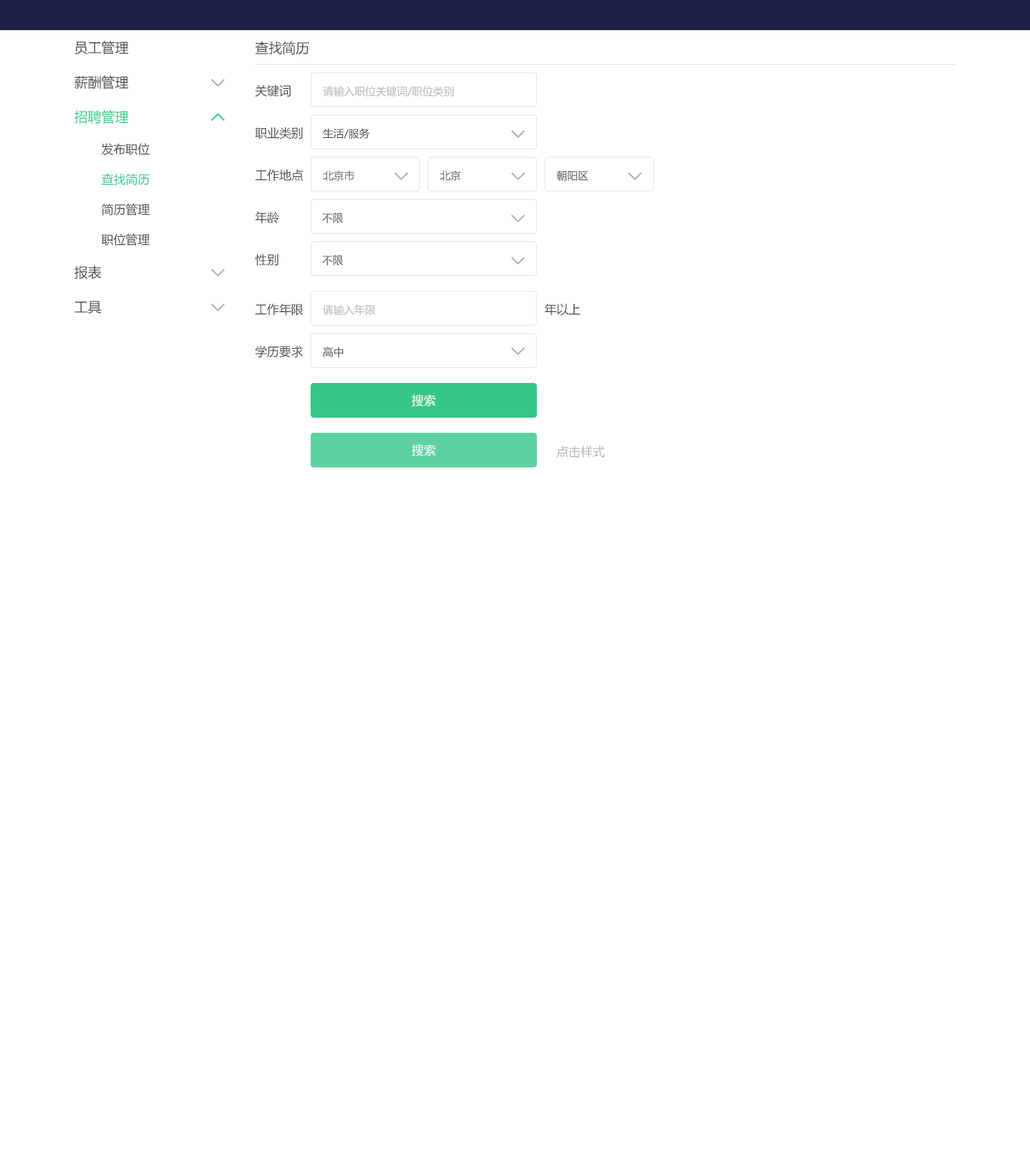
<style>
.page{position:relative;width:1030px;height:1158px;background:#ffffff}
.page>*{position:absolute;margin:0}
.t1{font:13.6px "MicrosoftYaHei";color:#4d4d4d}
.t2{font:12.1px "MicrosoftYaHei";color:#4d4d4d}
.t3{font:10.6px "MicrosoftYaHei";color:#b3b3b3}
.t4{font:13.6px "MicrosoftYaHei";color:#35c787}
.t5{font:10.6px "MicrosoftYaHei";color:#4d4d4d}
.t6{font:12.1px "MicrosoftYaHei";color:#35c787}
.t7{font:12.1px "MicrosoftYaHei";color:#ffffff}
.t8{font:12.1px "MicrosoftYaHei";color:#b3b3b3}
</style>
<div class="page">
<p class="t1" style="left:75px;top:41px;width:54px;height:13px">员工管理</p>
<p class="t1" style="left:255px;top:41px;width:54px;height:14px">查找简历</p>
<p class="t1" style="left:74px;top:75px;width:55px;height:14px">薪酬管理</p>
<p class="t2" style="left:255px;top:84px;width:36px;height:13px">关键词</p>
<p class="t3" style="left:323px;top:86px;width:131px;height:10px">请输入职位关键词/职位类别</p>
<p class="t4" style="left:74px;top:110px;width:55px;height:14px">招聘管理</p>
<p class="t2" style="left:255px;top:127px;width:47px;height:12px">职业类别</p>
<p class="t5" style="left:323px;top:128px;width:47px;height:11px">生活/服务</p>
<p class="t2" style="left:101px;top:143px;width:49px;height:12px">发布职位</p>
<p class="t6" style="left:101px;top:173px;width:49px;height:12px">查找简历</p>
<p class="t2" style="left:255px;top:169px;width:48px;height:12px">工作地点</p>
<p class="t5" style="left:323px;top:170px;width:31px;height:11px">北京市</p>
<p class="t5" style="left:440px;top:170px;width:21px;height:11px">北京</p>
<p class="t5" style="left:556px;top:170px;width:32px;height:11px">朝阳区</p>
<p class="t2" style="left:101px;top:204px;width:49px;height:12px">简历管理</p>
<p class="t2" style="left:255px;top:211px;width:24px;height:13px">年龄</p>
<p class="t5" style="left:322px;top:213px;width:21px;height:10px">不限</p>
<p class="t2" style="left:101px;top:234px;width:49px;height:12px">职位管理</p>
<p class="t2" style="left:255px;top:253px;width:23px;height:13px">性别</p>
<p class="t5" style="left:322px;top:256px;width:21px;height:9px">不限</p>
<p class="t1" style="left:74px;top:265px;width:28px;height:14px">报表</p>
<p class="t1" style="left:75px;top:301px;width:27px;height:13px">工具</p>
<p class="t2" style="left:255px;top:303px;width:48px;height:13px">工作年限</p>
<p class="t3" style="left:323px;top:305px;width:52px;height:10px">请输入年限</p>
<p class="t2" style="left:544px;top:303px;width:36px;height:13px">年以上</p>
<p class="t2" style="left:255px;top:345px;width:48px;height:12px">学历要求</p>
<p class="t5" style="left:323px;top:347px;width:20px;height:10px">高中</p>
<p class="t7" style="left:412px;top:394px;width:24px;height:12px">搜索</p>
<p class="t7" style="left:412px;top:444px;width:24px;height:12px">搜索</p>
<p class="t8" style="left:556px;top:446px;width:49px;height:12px">点击样式</p>
</div>
